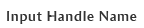
<style>
.page{position:relative;width:144px;height:28px;background:#ffffff}
.page>*{position:absolute;margin:0}
.t1{font:14px "AmiraParadiso";letter-spacing:0.05em;color:#333333}
</style>
<div class="page">
<p class="t1" style="left:7px;top:11px;width:130px;height:13px">Input Handle Name</p>
</div>
